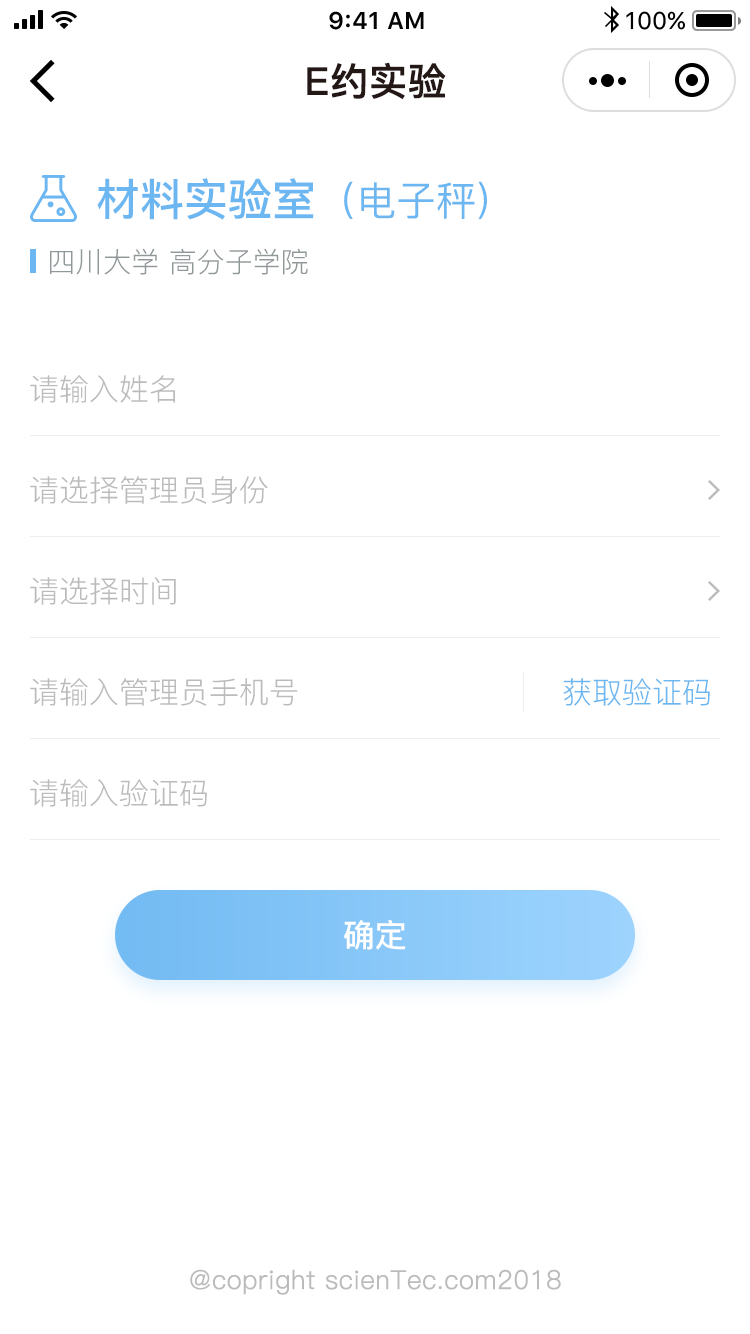
<style>
.page{position:relative;width:750px;height:1334px;background:#ffffff}
.page>*{position:absolute;margin:0}
.t1{font:38px "PingFang-SC-Bold";color:#231815;font-weight:bold}
.t2{font:44px "PingFang-SC-Bold";color:#6cb7f1}
.t3{font:40px "PingFang-SC-Medium";color:#6cb7f1}
.t4{font:28px "PingFang-SC-Regular";color:#91989a}
.t5{font:30px "PingFang-SC-Regular";color:#bbbbbb}
.t6{font:30px "PingFang-SC-Regular";color:#6cb7f1}
.t7{font:32px "PingFang-SC-Bold";color:#ffffff}
.t8{font:26px "PingFang-SC-Regular";color:#bbbbbb;font-weight:bold}
</style>
<div class="page">
<p class="t1" style="left:307px;top:62px;width:139px;height:38px">E约实验</p>
<p class="t2" style="left:97px;top:178px;width:390px;height:42px">材料实验室<span class="t3">（电子秤)</span></p>
<p class="t4" style="left:50px;top:248px;width:258px;height:27px">四川大学 高分子学院</p>
<p class="t5" style="left:30px;top:375px;width:145px;height:28px">请输入姓名</p>
<p class="t5" style="left:30px;top:476px;width:238px;height:28px">请选择管理员身份</p>
<p class="t5" style="left:30px;top:577px;width:146px;height:28px">请选择时间</p>
<p class="t5" style="left:30px;top:678px;width:268px;height:28px">请输入管理员手机号</p>
<p class="t6" style="left:563px;top:678px;width:147px;height:28px">获取验证码</p>
<p class="t5" style="left:30px;top:779px;width:177px;height:28px">请输入验证码</p>
<p class="t7" style="left:343px;top:920px;width:63px;height:30px">确定</p>
<p class="t8" style="left:190px;top:1269px;width:371px;height:26px">@copright scienTec.com2018</p>
</div>
